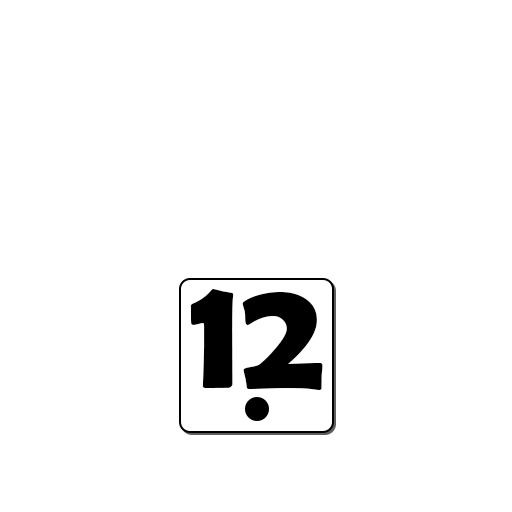
<style>
.page{position:relative;width:512px;height:512px;background:#ffffff}
.page>*{position:absolute;margin:0}
.t1{font:160px "BerlinSansFBDemi-Bold";color:#000000}
</style>
<div class="page">
<p class="t1" style="left:190px;top:289px;width:133px;height:101px">12</p>
</div>
